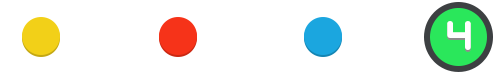
<style>
.page{position:relative;width:500px;height:75px;background:#ffffff}
.page>*{position:absolute;margin:0}
.t1{font:45.6px "GeometrySoftPro-BoldN";color:#ffffff}
</style>
<div class="page">
<p class="t1" style="left:447px;top:23px;width:24px;height:29px">4</p>
<p class="t1" style="left:447px;top:21px;width:24px;height:29px">4</p>
</div>
